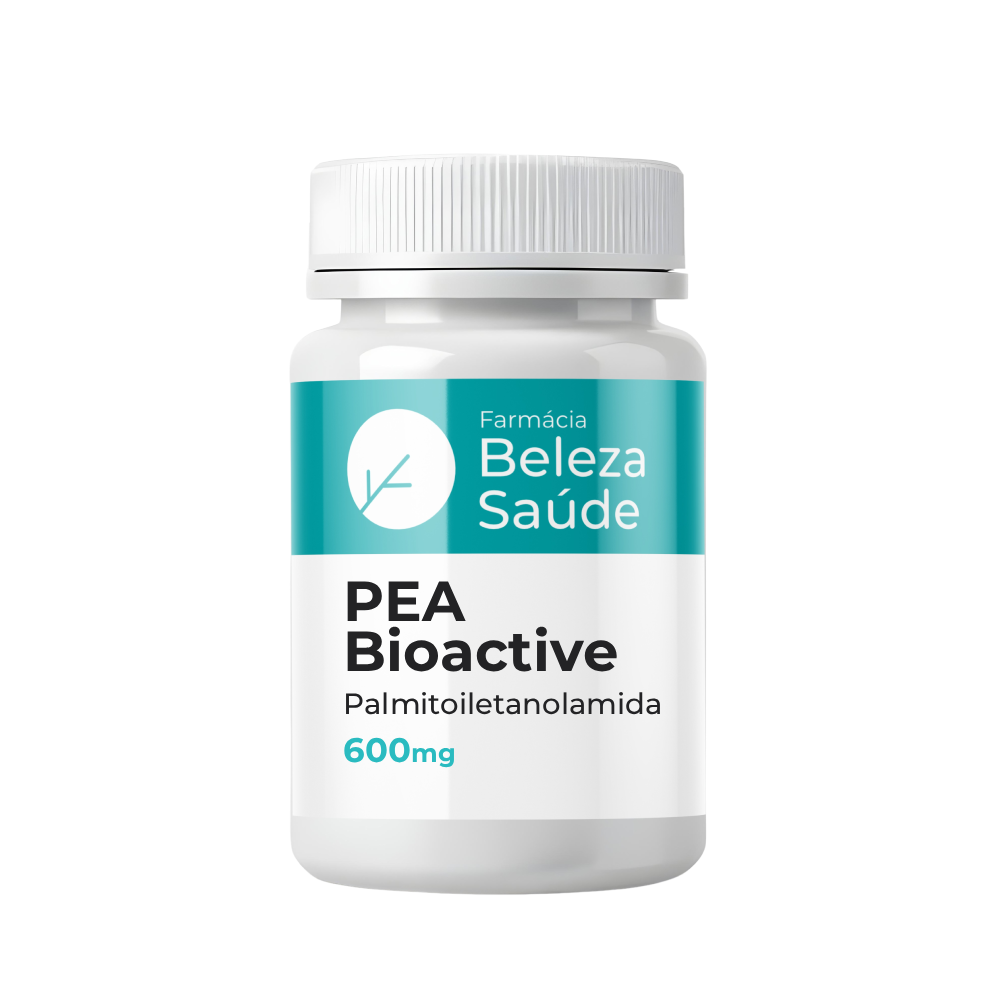
<style>
.page{position:relative;width:1000px;height:1000px;background:#ffffff}
.page>*{position:absolute;margin:0}
.t1{font:56.3px/50px "Montserrat-Bold";color:#232325}
.t2{font:29.2px "Montserrat-Medium";color:#232325}
.t3{font:33.9px "Montserrat-Bold";color:#2abbc0}
.t4{font:25.5px "Montserrat-Bold";color:#2abbc0}
</style>
<div class="page">
<p class="t1" style="left:347px;top:581px;width:270px;height:91px">PEA<br>Bioactive</p>
<p class="t2" style="left:346px;top:691px;width:314px;height:24px">Palmitoiletanolamida</p>
<p class="t3" style="left:344px;top:737px;width:110px;height:31px">600<span class="t4">mg</span></p>
</div>
